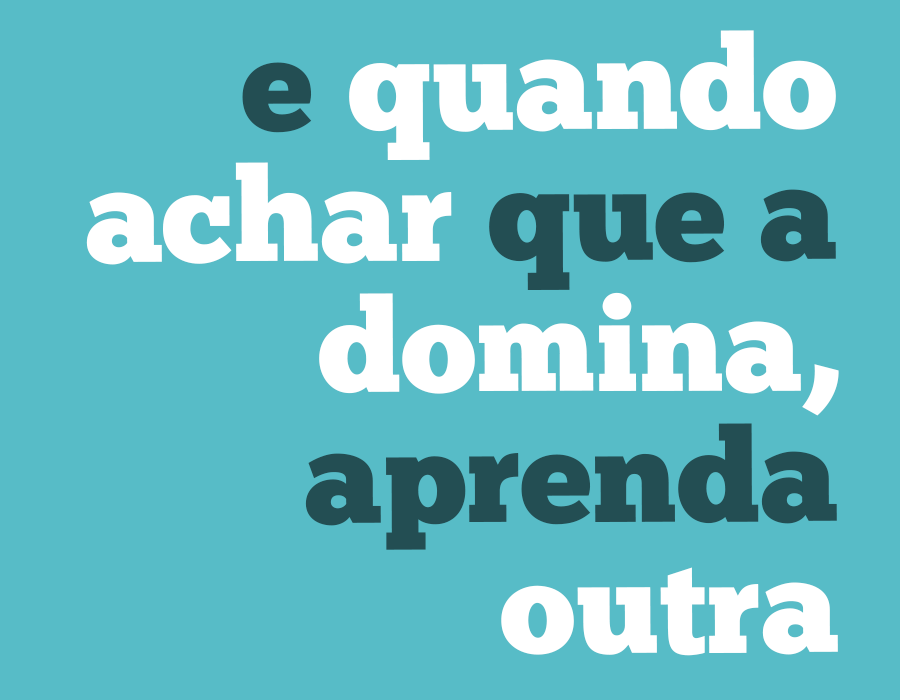
<style>
.page{position:relative;width:900px;height:700px;background:#57bcc7}
.page>*{position:absolute;margin:0}
.t1{font:131px/131px "ChunkFive-Roman";color:#ffffff}
.t2{font:131px/131px "ChunkFive-Roman";color:#234e53}
</style>
<div class="page">
<p class="t1" style="left:86px;top:30px;width:753px;height:626px;text-align:right"><span class="t2">e </span>quando<br>achar <span class="t2">que a<br></span>domina,<br><span class="t2">aprenda<br></span>outra</p>
</div>
